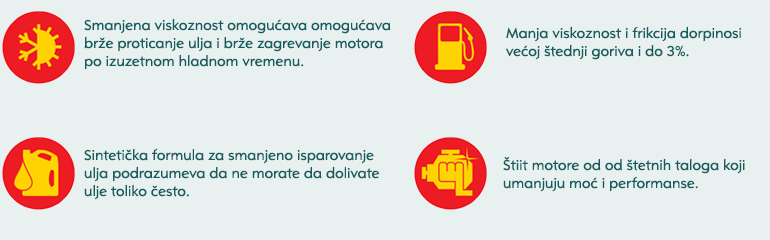
<style>
.page{position:relative;width:770px;height:240px;background:#e8f0f0}
.page>*{position:absolute;margin:0}
.t1{font:15px "OpelSans-Regular";color:#145d5d}
</style>
<div class="page">
<p class="t1" style="left:84px;top:18px;width:307px;height:52px">Smanjena viskoznost omogućava omogućava<br>brže proticanje ulja i brže zagrevanje motora<br>po izuzetnom hladnom vremenu.</p>
<p class="t1" style="left:506px;top:26px;width:235px;height:34px">Manja viskoznost i frikcija dorpinosi<br>većoj štednji goriva i do 3%.</p>
<p class="t1" style="left:84px;top:148px;width:296px;height:52px">Sintetička formula za smanjeno isparovanje <br>ulja podrazumeva da ne morate da dolivate <br>ulje toliko često.</p>
<p class="t1" style="left:503px;top:157px;width:242px;height:35px">Štiit motore od od štetnih taloga koji<br>umanjuju moć i performanse.</p>
</div>
